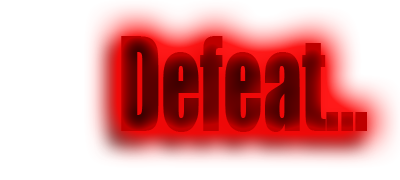
<style>
.page{position:relative;width:400px;height:180px;background:#ffffff}
.page>*{position:absolute;margin:0}
.t1{font:120.3px "Impact";scale:0.65 1}
</style>
<div class="page">
<p class="t1" style="left:121px;top:36px;width:246px;height:96px">Defeat...</p>
</div>
